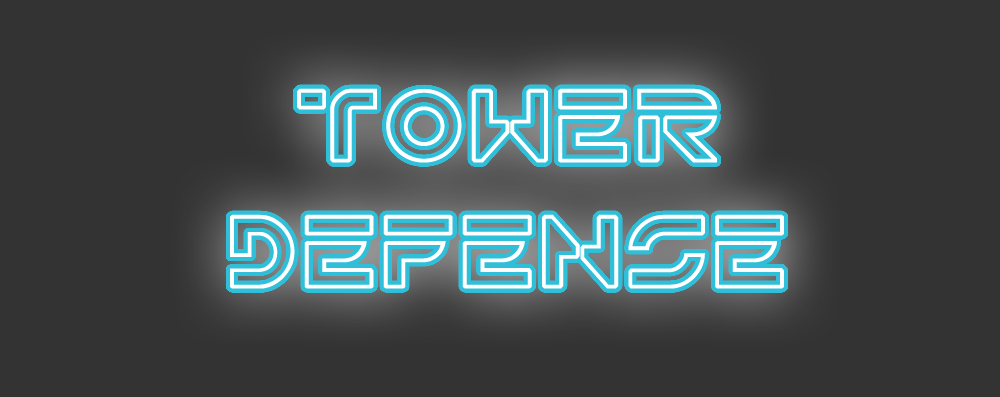
<style>
.page{position:relative;width:1000px;height:397px;background:#333333}
.page>*{position:absolute;margin:0}
.t1{font:105px "TRN";letter-spacing:0.08em;color:#ffffff}
</style>
<div class="page">
<p class="t1" style="left:230px;top:88px;width:554px;height:201px;text-align:center">TOWER<br>DEFENSE</p>
</div>
